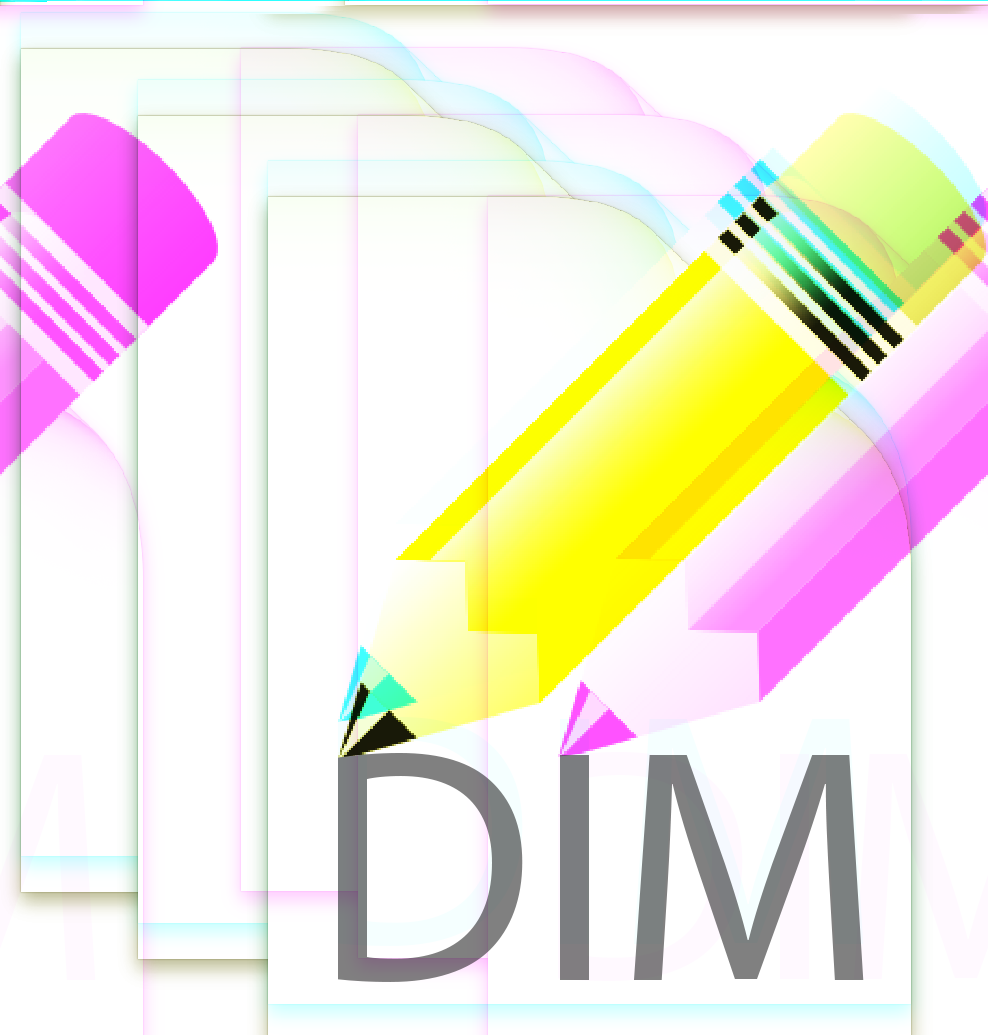
<style>
.page{position:relative;width:988px;height:1035px;background:#ffffff}
.page>*{position:absolute;margin:0}
.t1{font:333.3px "MyriadPro-Regular";color:#7a7c80}
</style>
<div class="page">
<p class="t1" style="left:338px;top:716px;width:526px;height:229px">DIM</p>
</div>
